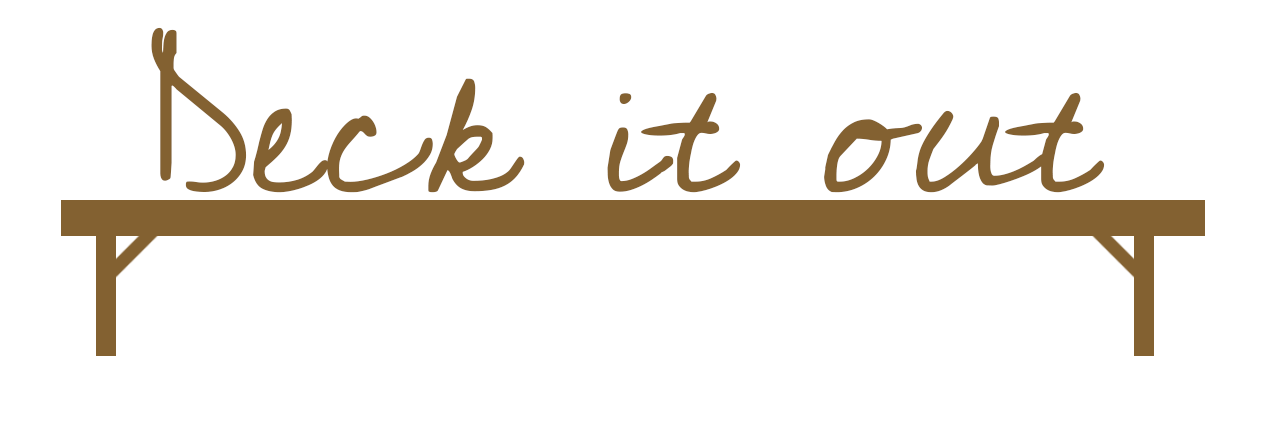
<style>
.page{position:relative;width:1282px;height:426px;background:#ffffff}
.page>*{position:absolute;margin:0}
.t1{font:200px "Cedarville-Cursive";color:#836131}
</style>
<div class="page">
<p class="t1" style="left:151px;top:27px;width:954px;height:166px">Deck it out</p>
</div>
